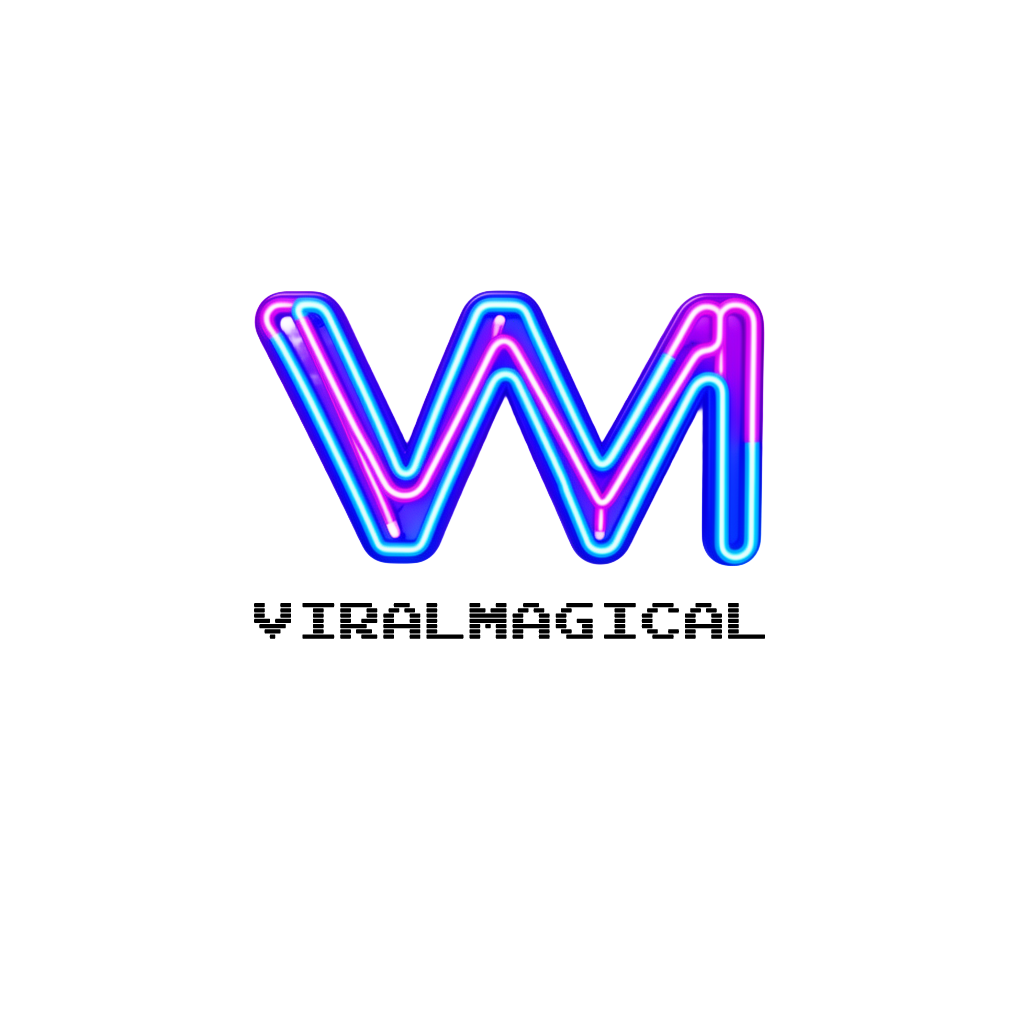
<style>
.page{position:relative;width:1024px;height:1024px;background:#ffffff}
.page>*{position:absolute;margin:0}
.t1{font:43px "ArcadeInterlaced";letter-spacing:0.024em;color:#000000}
</style>
<div class="page">
<p class="t1" style="left:254px;top:603px;width:511px;height:36px">ViralMagical</p>
</div>
